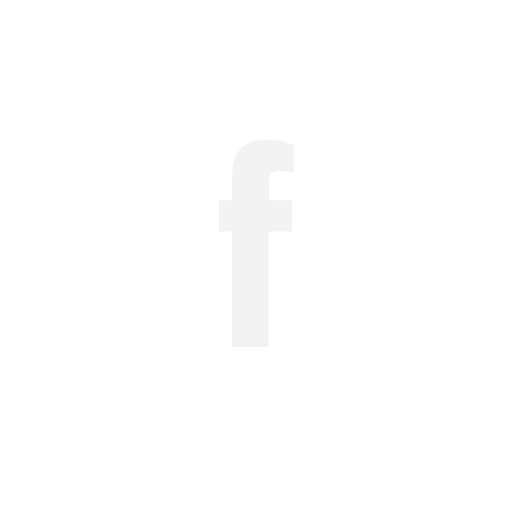
<style>
.page{position:relative;width:512px;height:512px;background:#ffffff}
.page>*{position:absolute;margin:0}
.t1{font:276.2px "CenturyGothic-Bold";color:#f3f3f3}
</style>
<div class="page">
<p class="t1" style="left:219px;top:139px;width:75px;height:208px">f</p>
</div>
